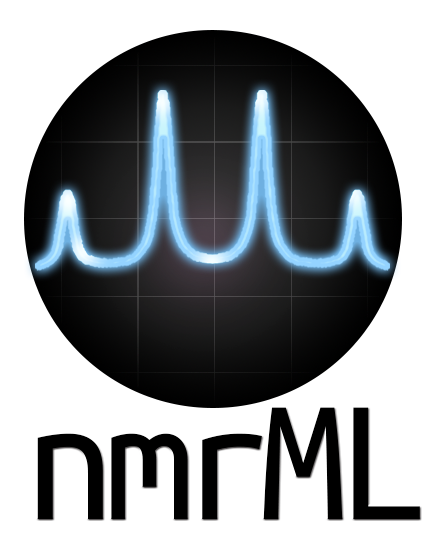
<style>
.page{position:relative;width:437px;height:534px;background:#ffffff}
.page>*{position:absolute;margin:0}
.t1{font:179.9px "UbuntuMono-Regular";color:#000000}
</style>
<div class="page">
<p class="t1" style="left:37px;top:407px;width:383px;height:112px">nmrML</p>
</div>
